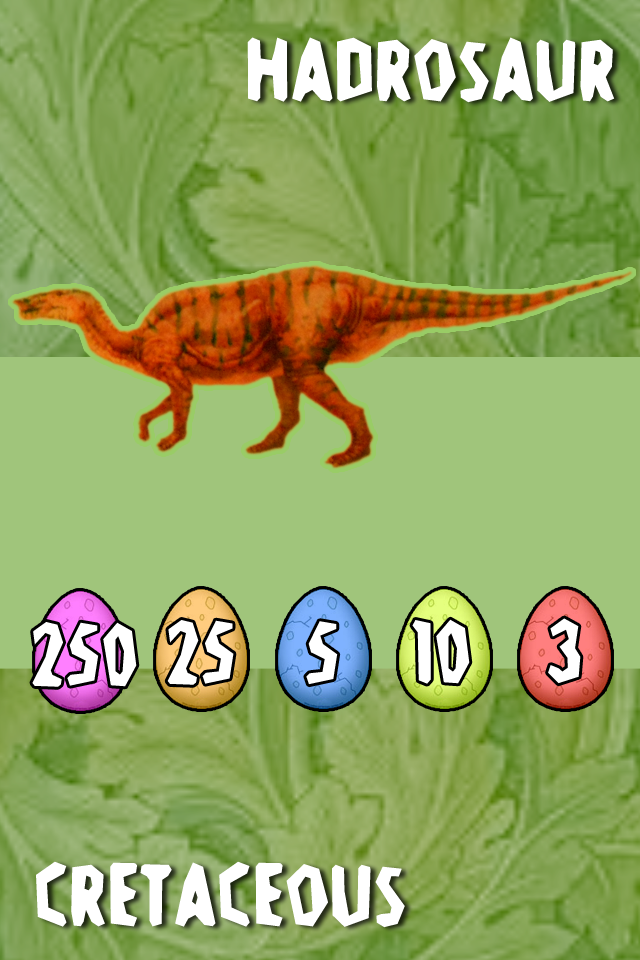
<style>
.page{position:relative;width:640px;height:960px;background:#a0c57b}
.page>*{position:absolute;margin:0}
.t1{font:96px "Stone-Age";color:#ffffff}
</style>
<div class="page">
<p class="t1" style="left:247px;top:37px;width:368px;height:66px">Hadrosaur</p>
<p class="t1" style="left:32px;top:622px;width:105px;height:65px">250</p>
<p class="t1" style="left:167px;top:620px;width:67px;height:65px">25</p>
<p class="t1" style="left:306px;top:621px;width:32px;height:64px">5</p>
<p class="t1" style="left:412px;top:619px;width:58px;height:65px">10</p>
<p class="t1" style="left:548px;top:618px;width:33px;height:66px">3</p>
<p class="t1" style="left:36px;top:861px;width:369px;height:67px">Cretaceous</p>
</div>
